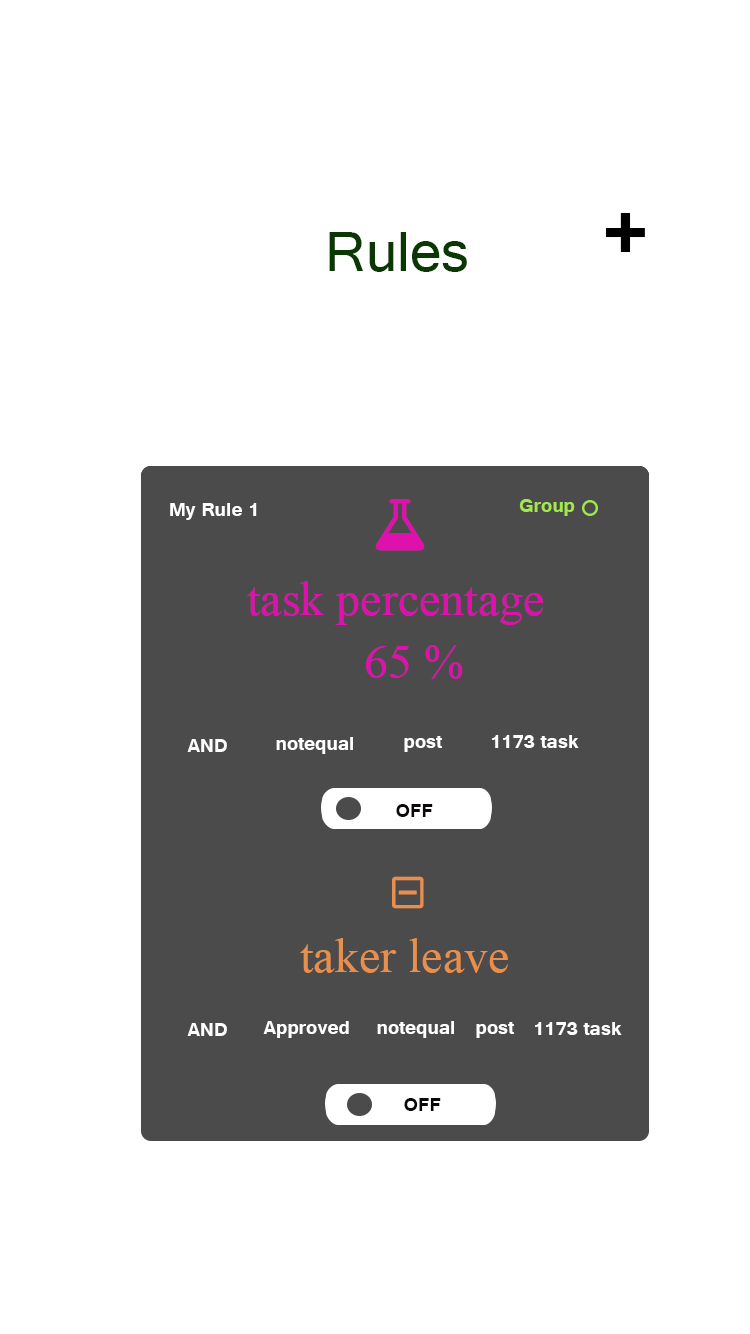
<style>
.page{position:relative;width:750px;height:1334px;background:#ffffff}
.page>*{position:absolute;margin:0}
.t1{font:103.1px "Tunga-Bold";color:#000000}
.t2{font:72px "Tunga";color:#093803}
.t3{font:24px "Tunga-Bold";color:#ffffff}
.t4{font:24px "Tunga-Bold";color:#a2e94d}
.t5{font:48px "TimesNewRomanPSMT";color:#df11ac}
.t6{font:24px "Tunga-Bold";color:#0b060a}
.t7{font:48px "TimesNewRomanPSMT";color:#e98f4d}
</style>
<div class="page">
<p class="t1" style="left:606px;top:213px;width:39px;height:39px">+</p>
<p class="t2" style="left:329px;top:232px;width:138px;height:40px">Rules</p>
<p class="t3" style="left:170px;top:503px;width:87px;height:17px">My Rule 1</p>
<p class="t4" style="left:519px;top:499px;width:56px;height:17px">Group</p>
<p class="t5" style="left:247px;top:581px;width:296px;height:44px">task percentage</p>
<p class="t5" style="left:247px;top:581px;width:296px;height:44px">task percentage</p>
<p class="t5" style="left:366px;top:645px;width:97px;height:34px">65 %</p>
<p class="t5" style="left:366px;top:645px;width:97px;height:34px">65 %</p>
<p class="t3" style="left:276px;top:737px;width:77px;height:17px">notequal</p>
<p class="t3" style="left:276px;top:737px;width:77px;height:17px">notequal</p>
<p class="t3" style="left:404px;top:736px;width:38px;height:16px">post</p>
<p class="t3" style="left:404px;top:736px;width:38px;height:16px">post</p>
<p class="t3" style="left:492px;top:735px;width:87px;height:13px">1173 task</p>
<p class="t3" style="left:492px;top:735px;width:87px;height:13px">1173 task</p>
<p class="t3" style="left:187px;top:739px;width:40px;height:13px">AND</p>
<p class="t3" style="left:187px;top:739px;width:40px;height:13px">AND</p>
<p class="t6" style="left:396px;top:804px;width:37px;height:13px">OFF</p>
<p class="t7" style="left:300px;top:938px;width:208px;height:35px">taker leave</p>
<p class="t3" style="left:187px;top:1023px;width:40px;height:13px">AND</p>
<p class="t3" style="left:263px;top:1021px;width:86px;height:17px">Approved</p>
<p class="t3" style="left:377px;top:1021px;width:77px;height:17px">notequal</p>
<p class="t3" style="left:476px;top:1022px;width:38px;height:16px">post</p>
<p class="t3" style="left:535px;top:1022px;width:87px;height:13px">1173 task</p>
<p class="t6" style="left:404px;top:1098px;width:37px;height:13px">OFF</p>
</div>
